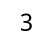
<style>
.page{position:relative;width:53px;height:41px;background:#ffffff}
.page>*{position:absolute;margin:0}
.t1{font:23.7px "DroidSans";color:#000000}
</style>
<div class="page">
<p class="t1" style="left:21px;top:13px;width:11px;height:18px">3</p>
</div>
